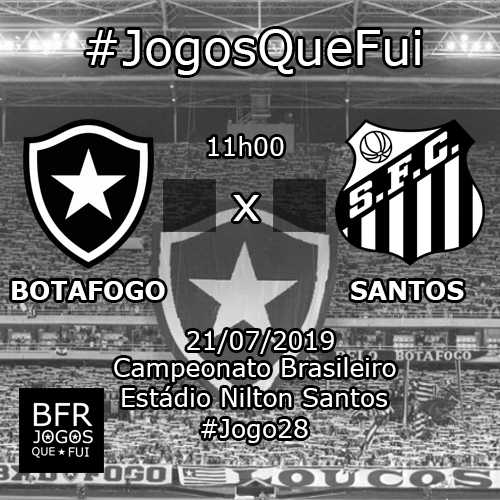
<style>
.page{position:relative;width:500px;height:500px}
.page>*{position:absolute;margin:0}
.t1{font:48px "Verdana";color:#ffffff}
.t2{font:25px "Verdana";color:#ffffff}
.t3{font:25px "Verdana-Bold";color:#ffffff}
</style>
<div class="page">
<p class="t1" style="left:86px;top:29px;width:335px;height:46px">#JogosQueFui</p>
<p class="t2" style="left:208px;top:136px;width:76px;height:20px">11h00</p>
<p class="t1" style="left:233px;top:195px;width:26px;height:26px">x</p>
<p class="t3" style="left:12px;top:281px;width:153px;height:19px">BOTAFOGO</p>
<p class="t3" style="left:351px;top:281px;width:113px;height:19px">SANTOS</p>
<p class="t2" style="left:187px;top:330px;width:147px;height:24px">21/07/2019</p>
<p class="t2" style="left:114px;top:357px;width:282px;height:25px">Campeonato Brasileiro</p>
<p class="t2" style="left:122px;top:386px;width:265px;height:21px">Estádio Nilton Santos</p>
<p class="t2" style="left:201px;top:419px;width:107px;height:24px">#Jogo28</p>
</div>
